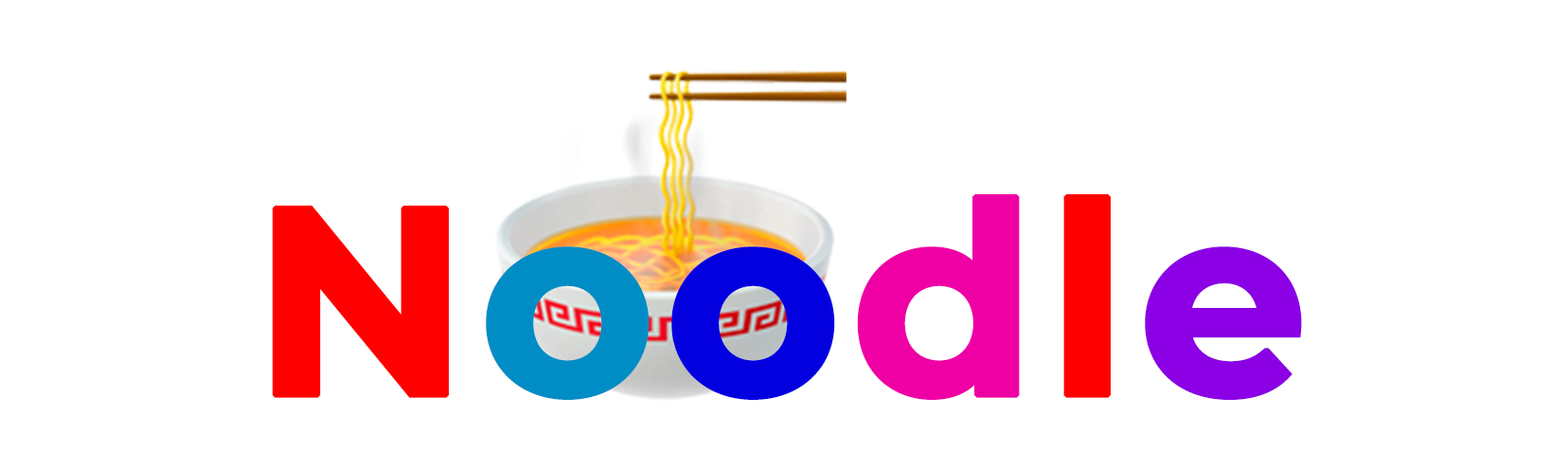
<style>
.page{position:relative;width:1568px;height:470px;background:#ffffff}
.page>*{position:absolute;margin:0}
.t1{font:266.9px "Montserrat-Bold";letter-spacing:0.015em;color:#ff0000;font-weight:bold}
.t2{font:266.9px "Montserrat-Bold";letter-spacing:0.015em;color:#008dc6;font-weight:bold}
.t3{font:266.9px "Montserrat-Bold";letter-spacing:0.015em;color:#0300e0;font-weight:bold}
.t4{font:266.9px "Montserrat-Bold";letter-spacing:0.015em;color:#ef00a5;font-weight:bold}
.t5{font:266.9px "Montserrat-Bold";letter-spacing:0.015em;color:#8b00e4;font-weight:bold}
</style>
<div class="page">
<p class="t1" style="left:272px;top:194px;width:1030px;height:206px">N<span class="t2">o</span><span class="t3">o</span><span class="t4">d</span>l<span class="t5">e</span></p>
</div>
